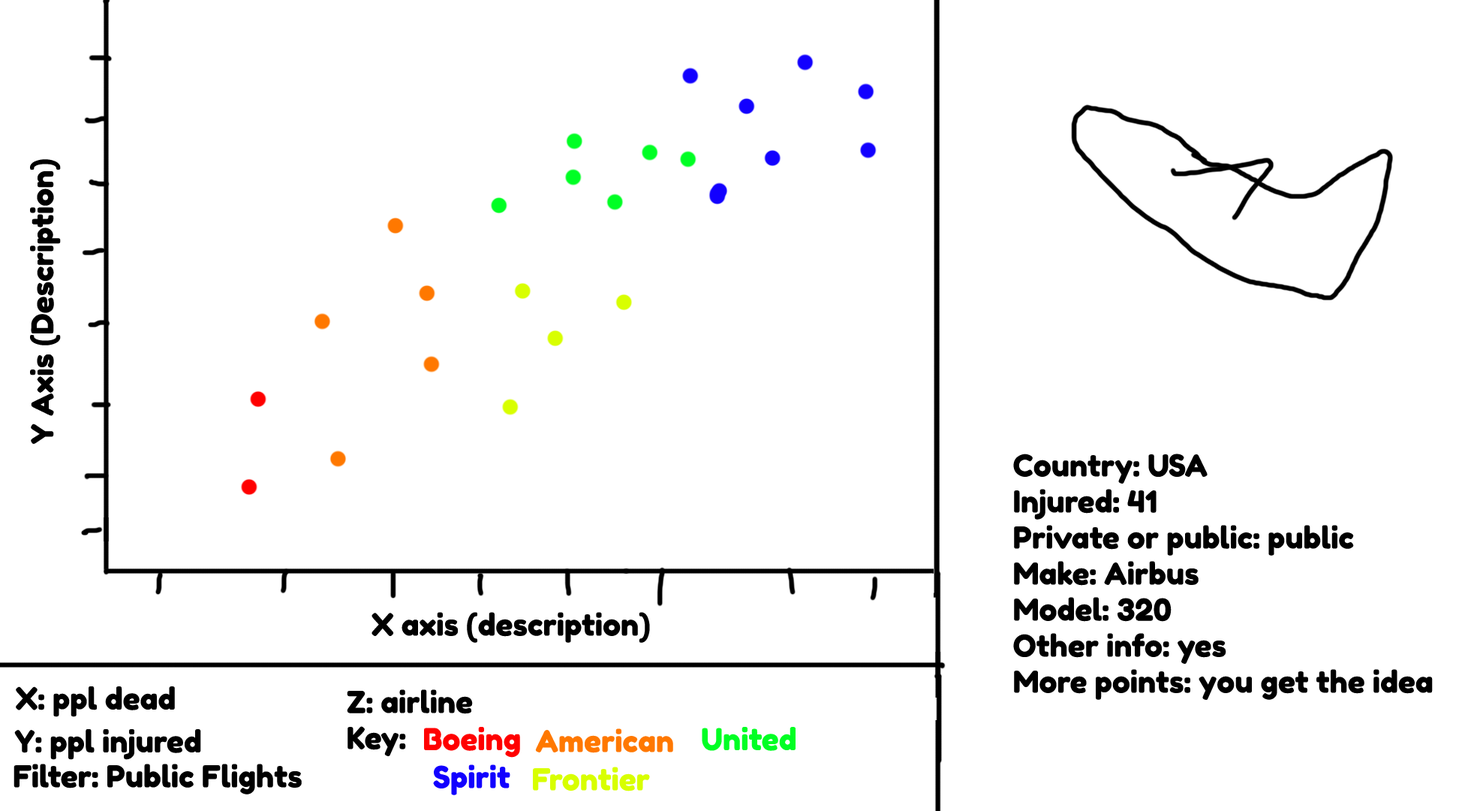
<style>
.page{position:relative;width:1471px;height:811px;background:#ffffff}
.page>*{position:absolute;margin:0}
.t1{font:30px "FredokaOne-Regular";color:#000000}
.t2{font:30px "FredokaOne-Regular";color:#ff0000}
.t3{font:30px "FredokaOne-Regular";color:#ff7800}
.t4{font:30px "FredokaOne-Regular";color:#00ff24}
.t5{font:30px "FredokaOne-Regular";color:#1200ff}
.t6{font:30px "FredokaOne-Regular";color:#d8ff00}
</style>
<div class="page">
<p class="t1" style="left:30px;top:159px;width:31px;height:285px;rotate:-90deg">Y Axis (Description)</p>
<p class="t1" style="left:1013px;top:453px;width:420px;height:247px">Country: USA<br>Injured: 41<br>Private or public: public<br>Make: Airbus<br>Model: 320<br>Other info: yes<br>More points: you get the idea</p>
<p class="t1" style="left:372px;top:612px;width:278px;height:30px">X axis (description)</p>
<p class="t1" style="left:16px;top:686px;width:159px;height:31px">X: ppl dead</p>
<p class="t1" style="left:347px;top:689px;width:126px;height:25px">Z: airline</p>
<p class="t1" style="left:348px;top:726px;width:58px;height:30px">Key:</p>
<p class="t1" style="left:14px;top:729px;width:187px;height:31px">Y: ppl injured</p>
<p class="t2" style="left:424px;top:727px;width:96px;height:30px">Boeing</p>
<p class="t3" style="left:535px;top:728px;width:138px;height:25px">American</p>
<p class="t4" style="left:702px;top:727px;width:94px;height:24px">United</p>
<p class="t1" style="left:14px;top:763px;width:288px;height:31px">Filter: Public Flights</p>
<p class="t5" style="left:433px;top:764px;width:77px;height:31px">Spirit</p>
<p class="t6" style="left:533px;top:766px;width:117px;height:25px">Frontier</p>
</div>
